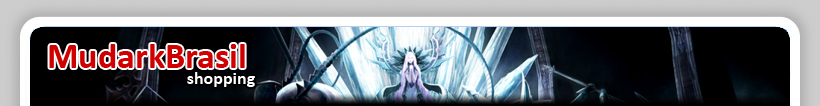
<style>
.page{position:relative;width:820px;height:106px}
.page>*{position:absolute;margin:0}
.t1{font:36px "Calibri-Bold";color:#d00000}
.t2{font:18px "Calibri-Bold";color:#ffffff}
</style>
<div class="page">
<p class="t1" style="left:49px;top:44px;width:196px;height:24px">MudarkBrasil</p>
<p class="t2" style="left:187px;top:72px;width:68px;height:15px">shopping</p>
</div>
